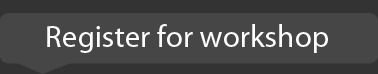
<style>
.page{position:relative;width:378px;height:74px;background:#464646}
.page>*{position:absolute;margin:0}
.t1{font:31.3px "MyriadPro-Regular";color:#ffffff}
</style>
<div class="page">
<p class="t1" style="left:47px;top:24px;width:281px;height:29px">Register for workshop</p>
</div>
